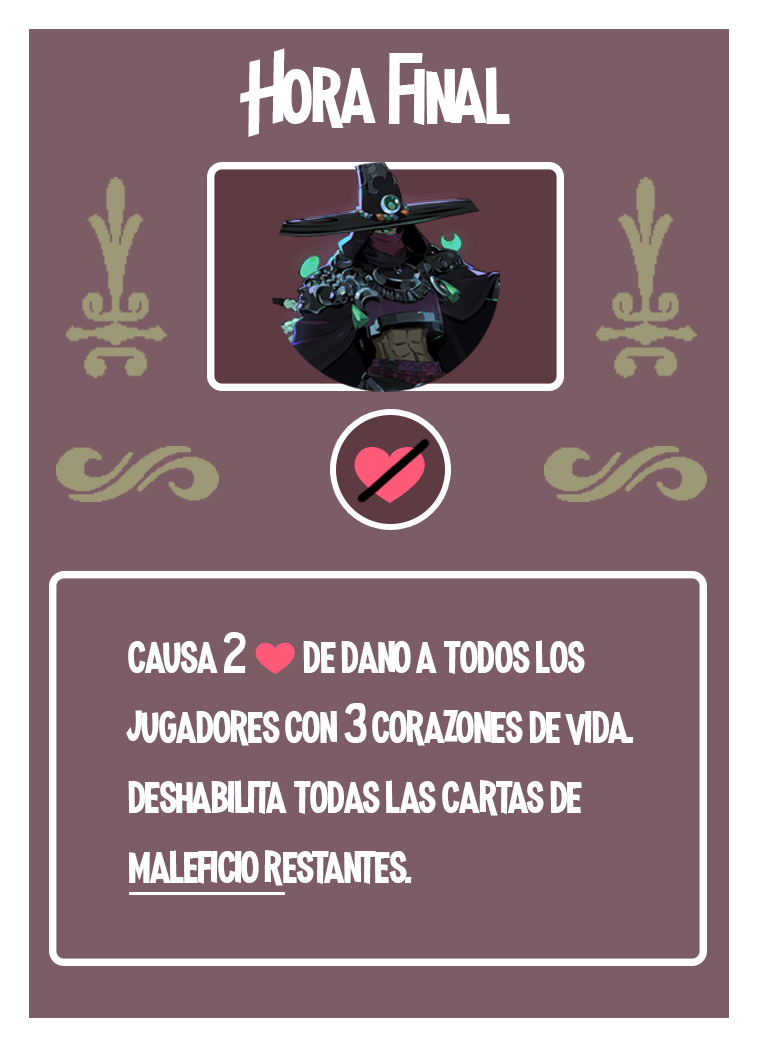
<style>
.page{position:relative;width:758px;height:1047px;background:#7d5d65}
.page>*{position:absolute;margin:0}
.t1{font:100px "MadnessHyperactive";color:#ffffff}
.t2{font:58.3px "MadnessHyperactive";color:#ffffff}
.t3{font:41.7px "EmojiOneColor";color:#ffffff}
</style>
<div class="page">
<p class="t1" style="left:240px;top:48px;width:270px;height:89px">Hora Final</p>
<p class="t2" style="left:126px;top:632px;width:508px;height:254px">causa 2 <span class="t3">❤️ </span>de dano a todos los jugadores con 3 corazones de vida.<br>deshabilita todas las cartas de maleficio restantes.</p>
</div>
